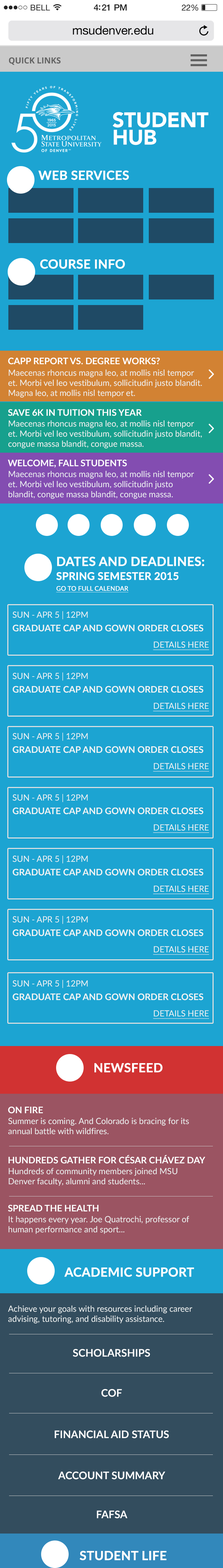
<style>
.page{position:relative;width:223px;height:1568px;background:#1ca4d2}
.page>*{position:absolute;margin:0}
.t1{font:12.2px "HelveticaNeue";letter-spacing:-0.01em;color:#000000}
.t2{font:8.4px "OpenSans-Bold";letter-spacing:-0.01em;color:#626262;text-transform:uppercase}
.t3{font:20.9px/17.4px "Avenir-Black";letter-spacing:-0.01em;color:#ffffff}
.t4{font:12.5px "Lato-Bold";letter-spacing:-0.01em;color:#ffffff;text-transform:uppercase;font-weight:bold}
.t5{font:9.1px "Lato-Bold";color:#ffffff;text-transform:uppercase}
.t6{font:8.4px "Lato-Regular";color:#eff3f3}
.t7{font:10.4px "Lato-Bold";letter-spacing:-0.01em;color:#ffffff;text-transform:uppercase;font-weight:bold}
.t8{font:6.3px "Lato-Regular";letter-spacing:-0.01em;color:#ffffff;text-transform:uppercase;font-weight:bold;text-decoration:underline}
.t9{font:9.1px "Lato-Bold";color:#eff3f3}
.t10{font:8.4px "Lato-Regular";color:#eff3f3;text-decoration:underline}
.t11{font:10.4px "Lato-Bold";color:#ffffff;text-transform:uppercase}
</style>
<div class="page">
<p class="t1" style="left:73px;top:26px;width:80px;height:9px">msudenver.edu</p>
<p class="t2" style="left:9px;top:57px;width:52px;height:8px">Quick Links</p>
<p class="t3" style="left:112px;top:112px;width:96px;height:33px">STUDENT<br>HUB</p>
<p class="t4" style="left:38px;top:170px;width:91px;height:10px">Web Services</p>
<p class="t4" style="left:40px;top:259px;width:85px;height:10px">course info</p>
<p class="t5" style="left:8px;top:358px;width:152px;height:7px">capp report vs. Degree works?</p>
<p class="t6" style="left:8px;top:369px;width:194px;height:29px">Maecenas rhoncus magna leo, at mollis nisl tempor et. Morbi vel leo vestibulum, sollicitudin justo blandit. Magna leo, at mollis nisl tempor et.</p>
<p class="t5" style="left:8px;top:409px;width:134px;height:7px">save 6k in tuition this year</p>
<p class="t6" style="left:8px;top:420px;width:194px;height:28px">Maecenas rhoncus magna leo, at mollis nisl tempor et. Morbi vel leo vestibulum, sollicitudin justo blandit, congue massa blandit, congue massa.</p>
<p class="t5" style="left:8px;top:460px;width:119px;height:8px">welcome, fall students</p>
<p class="t6" style="left:8px;top:471px;width:186px;height:28px">Maecenas rhoncus magna leo, at mollis nisl tempor et. Morbi vel leo vestibulum, sollicitudin justo blandit, congue massa blandit, congue massa.</p>
<p class="t4" style="left:57px;top:556px;width:147px;height:10px">dates and deadlines:</p>
<p class="t7" style="left:56px;top:572px;width:122px;height:8px">spring semester 2015</p>
<p class="t8" style="left:56px;top:586px;width:72px;height:6px">go to full calendar</p>
<p class="t6" style="left:13px;top:611px;width:75px;height:8px">SUN - APR 5 | 12PM</p>
<p class="t9" style="left:13px;top:625px;width:190px;height:7px">GRADUATE CAP AND GOWN ORDER CLOSES</p>
<p class="t10" style="left:153px;top:641px;width:56px;height:9px">DETAILS HERE</p>
<p class="t6" style="left:13px;top:672px;width:75px;height:9px">SUN - APR 5 | 12PM</p>
<p class="t9" style="left:13px;top:686px;width:190px;height:7px">GRADUATE CAP AND GOWN ORDER CLOSES</p>
<p class="t10" style="left:153px;top:703px;width:56px;height:8px">DETAILS HERE</p>
<p class="t6" style="left:13px;top:733px;width:75px;height:8px">SUN - APR 5 | 12PM</p>
<p class="t9" style="left:13px;top:746px;width:190px;height:7px">GRADUATE CAP AND GOWN ORDER CLOSES</p>
<p class="t10" style="left:153px;top:763px;width:56px;height:9px">DETAILS HERE</p>
<p class="t6" style="left:13px;top:794px;width:75px;height:8px">SUN - APR 5 | 12PM</p>
<p class="t9" style="left:13px;top:808px;width:190px;height:6px">GRADUATE CAP AND GOWN ORDER CLOSES</p>
<p class="t10" style="left:153px;top:824px;width:56px;height:9px">DETAILS HERE</p>
<p class="t6" style="left:13px;top:855px;width:75px;height:9px">SUN - APR 5 | 12PM</p>
<p class="t9" style="left:13px;top:869px;width:190px;height:7px">GRADUATE CAP AND GOWN ORDER CLOSES</p>
<p class="t10" style="left:153px;top:886px;width:56px;height:8px">DETAILS HERE</p>
<p class="t6" style="left:13px;top:916px;width:75px;height:8px">SUN - APR 5 | 12PM</p>
<p class="t9" style="left:13px;top:929px;width:190px;height:7px">GRADUATE CAP AND GOWN ORDER CLOSES</p>
<p class="t10" style="left:153px;top:946px;width:56px;height:9px">DETAILS HERE</p>
<p class="t6" style="left:13px;top:980px;width:75px;height:8px">SUN - APR 5 | 12PM</p>
<p class="t9" style="left:13px;top:993px;width:190px;height:7px">GRADUATE CAP AND GOWN ORDER CLOSES</p>
<p class="t10" style="left:153px;top:1010px;width:56px;height:9px">DETAILS HERE</p>
<p class="t4" style="left:94px;top:1063px;width:69px;height:9px">Newsfeed</p>
<p class="t5" style="left:8px;top:1107px;width:35px;height:7px">ON FIRE</p>
<p class="t6" style="left:8px;top:1118px;width:181px;height:16px">Summer is coming. And Colorado is bracing for its annual battle with wildfires.</p>
<p class="t5" style="left:8px;top:1155px;width:197px;height:9px">HUNDREDS GATHER FOR CÉSAR CHÁVEZ DAY</p>
<p class="t6" style="left:9px;top:1168px;width:168px;height:18px">Hundreds of community members joined MSU Denver faculty, alumni and students...</p>
<p class="t5" style="left:8px;top:1205px;width:91px;height:7px">SPREAD THE HEALTH</p>
<p class="t6" style="left:8px;top:1216px;width:181px;height:18px">It happens every year. Joe Quatrochi, professor of human performance and sport...</p>
<p class="t4" style="left:64px;top:1267px;width:130px;height:10px">academic support</p>
<p class="t6" style="left:8px;top:1305px;width:184px;height:19px">Achieve your goals with resources including career advising, tutoring, and disability assistance.</p>
<p class="t11" style="left:73px;top:1349px;width:77px;height:8px">scholarships</p>
<p class="t11" style="left:101px;top:1389px;width:21px;height:8px">cof</p>
<p class="t11" style="left:55px;top:1430px;width:114px;height:8px">financial aid status</p>
<p class="t11" style="left:58px;top:1472px;width:107px;height:8px">account summary</p>
<p class="t11" style="left:97px;top:1511px;width:30px;height:8px">fafsa</p>
<p class="t4" style="left:79px;top:1551px;width:87px;height:9px">student life</p>
</div>
